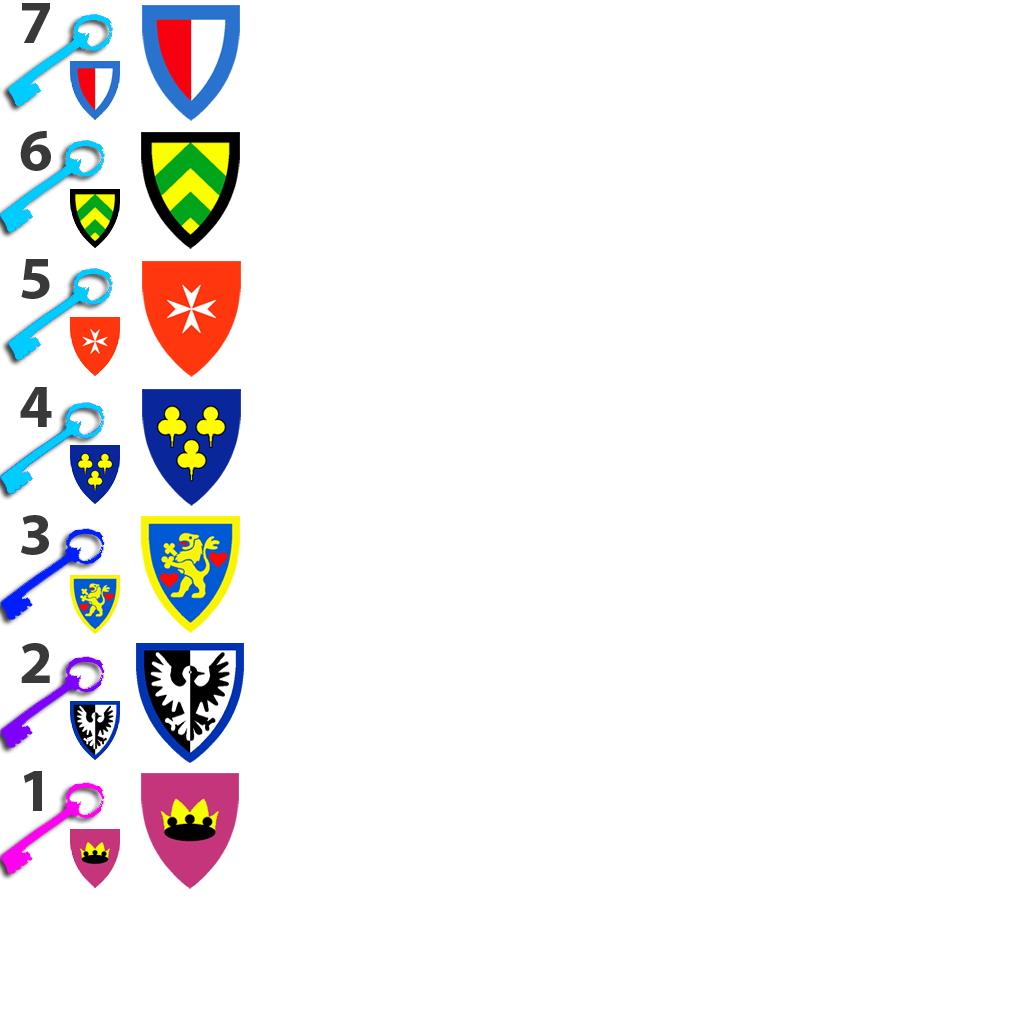
<style>
.page{position:relative;width:1024px;height:1024px;background:#ffffff}
.page>*{position:absolute;margin:0}
.t1{font:61px "MyriadPro-Bold";letter-spacing:0.1em;color:#393939}
</style>
<div class="page">
<p class="t1" style="left:22px;top:3px;width:28px;height:40px">7</p>
<p class="t1" style="left:20px;top:131px;width:31px;height:40px">6</p>
<p class="t1" style="left:21px;top:259px;width:29px;height:40px">5</p>
<p class="t1" style="left:20px;top:387px;width:32px;height:40px">4</p>
<p class="t1" style="left:21px;top:515px;width:28px;height:40px">3</p>
<p class="t1" style="left:21px;top:643px;width:29px;height:40px">2</p>
<p class="t1" style="left:23px;top:771px;width:19px;height:40px">1</p>
</div>
